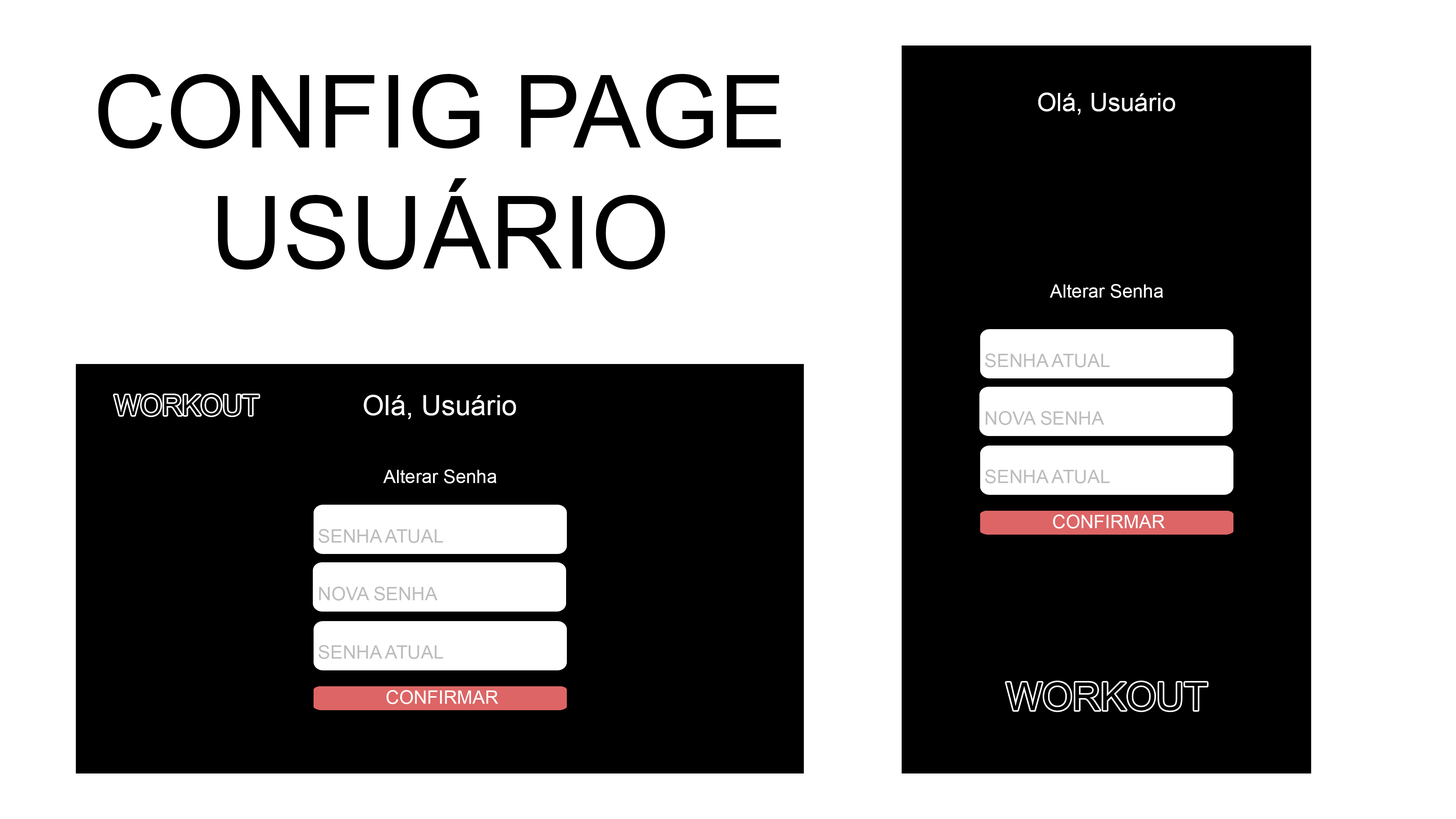
<style>
.page{position:relative;width:1456px;height:819px;background:#ffffff}
.page>*{position:absolute;margin:0}
.t1{font:100.9px "ArialMT";color:#000000}
.t2{font:25px "ArialMT";color:#ffffff}
.t3{font:18.6px "ArialMT";color:#ffffff}
.t4{font:18.6px "ArialMT";color:#bcbcbc}
.t5{font:27.7px "ArialMT";color:#000000}
.t6{font:27.8px "ArialMT";color:#ffffff}
.t7{font:38.7px "ArialMT";color:#000000}
</style>
<div class="page">
<p class="t1" style="left:98px;top:74px;width:683px;height:196px;text-align:center">CONFIG PAGE USUÁRIO</p>
<p class="t2" style="left:1038px;top:93px;width:137px;height:22px">Olá, Usuário</p>
<p class="t3" style="left:1050px;top:284px;width:113px;height:14px">Alterar Senha</p>
<p class="t4" style="left:985px;top:353px;width:125px;height:14px">SENHA ATUAL</p>
<p class="t5" style="left:114px;top:395px;width:145px;height:21px">WORKOUT</p>
<p class="t6" style="left:364px;top:395px;width:152px;height:24px">Olá, Usuário</p>
<p class="t4" style="left:985px;top:411px;width:119px;height:14px">NOVA SENHA</p>
<p class="t3" style="left:383px;top:469px;width:113px;height:14px">Alterar Senha</p>
<p class="t4" style="left:985px;top:469px;width:125px;height:14px">SENHA ATUAL</p>
<p class="t3" style="left:1053px;top:515px;width:112px;height:14px">CONFIRMAR</p>
<p class="t4" style="left:318px;top:529px;width:125px;height:14px">SENHA ATUAL</p>
<p class="t4" style="left:319px;top:587px;width:119px;height:14px">NOVA SENHA</p>
<p class="t4" style="left:318px;top:645px;width:125px;height:14px">SENHA ATUAL</p>
<p class="t7" style="left:1006px;top:682px;width:201px;height:29px">WORKOUT</p>
<p class="t3" style="left:386px;top:690px;width:112px;height:14px">CONFIRMAR</p>
</div>
